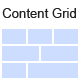
<style>
.page{position:relative;width:80px;height:80px;background:#ccddff}
.page>*{position:absolute;margin:0}
.t1{font:13px "ArialMT";letter-spacing:0.005em;color:#222222}
</style>
<div class="page">
<p class="t1" style="left:2px;top:8px;width:74px;height:10px">Content Grid</p>
</div>
